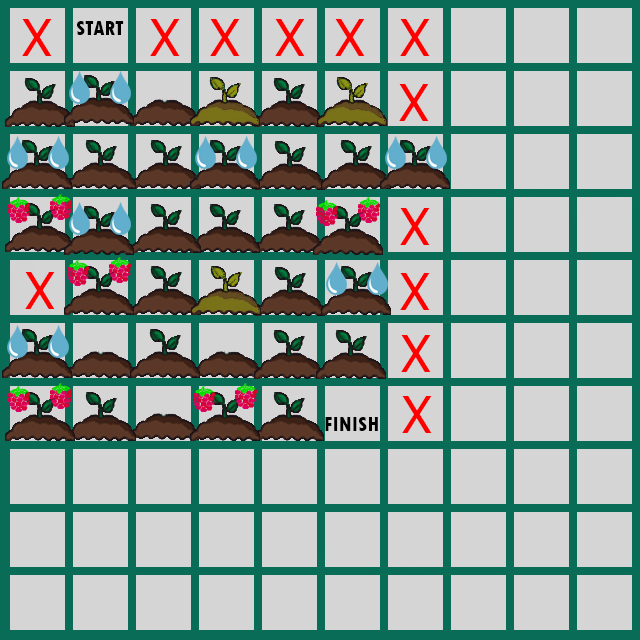
<style>
.page{position:relative;width:640px;height:640px;background:#d5d5d5}
.page>*{position:absolute;margin:0}
.t1{font:50.8px "Tahoma";color:#ff0000}
.t2{font:21.2px "TwCenMT-CondensedExtraBold";color:#000000}
</style>
<div class="page">
<p class="t1" style="left:22px;top:19px;width:30px;height:37px">X</p>
<p class="t2" style="left:77px;top:21px;width:47px;height:14px">START</p>
<p class="t1" style="left:150px;top:19px;width:30px;height:37px">X</p>
<p class="t1" style="left:210px;top:19px;width:30px;height:37px">X</p>
<p class="t1" style="left:275px;top:19px;width:30px;height:37px">X</p>
<p class="t1" style="left:335px;top:19px;width:30px;height:37px">X</p>
<p class="t1" style="left:400px;top:19px;width:30px;height:37px">X</p>
<p class="t1" style="left:399px;top:84px;width:30px;height:37px">X</p>
<p class="t1" style="left:400px;top:208px;width:30px;height:37px">X</p>
<p class="t1" style="left:25px;top:272px;width:30px;height:37px">X</p>
<p class="t1" style="left:400px;top:273px;width:30px;height:37px">X</p>
<p class="t1" style="left:401px;top:335px;width:30px;height:37px">X</p>
<p class="t1" style="left:402px;top:396px;width:30px;height:37px">X</p>
<p class="t2" style="left:325px;top:417px;width:53px;height:14px">FINISH</p>
</div>
